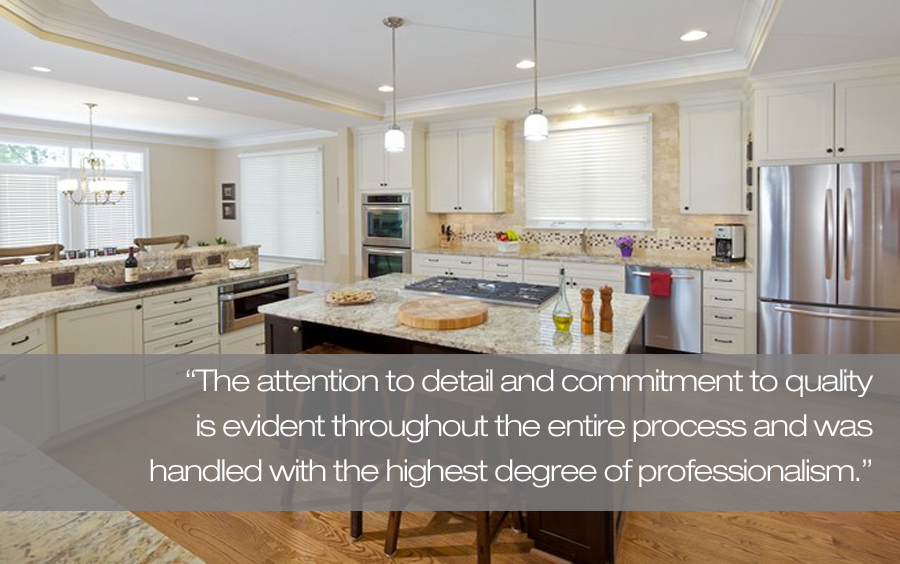
<style>
.page{position:relative;width:900px;height:564px}
.page>*{position:absolute;margin:0}
.t1{font:30px/45px "HelveticaNeueLTStd-LtEx";letter-spacing:-0.04em;color:#ffffff}
</style>
<div class="page">
<p class="t1" style="left:150px;top:369px;width:724px;height:119px;text-align:right">“The attention to detail and commitment to quality<br>is evident throughout the entire process and was<br>handled with the highest degree of professionalism.”</p>
</div>
